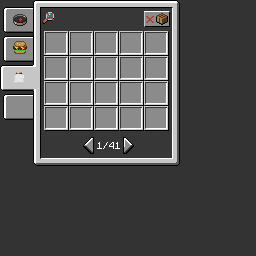
<style>
.page{position:relative;width:256px;height:256px;background:#333333}
.page>*{position:absolute;margin:0}
.t1{font:10px "Minecraft-Regular";color:#ffffff}
</style>
<div class="page">
<p class="t1" style="left:97px;top:142px;width:23px;height:7px">1/41</p>
</div>
